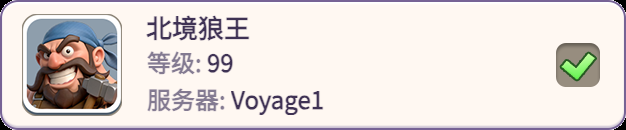
<style>
.page{position:relative;width:626px;height:130px;background:#fff8f2}
.page>*{position:absolute;margin:0}
.t1{font:26px "WebPSD-18463539-0-Regular";color:#3f3254;font-weight:bold}
.t2{font:24px "WebPSD-18463539-0-Regular";color:#837a91;font-weight:bold}
.t3{font:24px "WebPSD-18463539-0-Regular";color:#3f3254;font-weight:bold}
</style>
<div class="page">
<p class="t1" style="left:146px;top:14px;width:360px;height:28px">北境狼王</p>
<p class="t2" style="left:147px;top:49px;width:60px;height:28px">等级:</p>
<p class="t3" style="left:207px;top:49px;width:330px;height:28px">99</p>
<p class="t2" style="left:147px;top:85px;width:84px;height:30px">服务器:</p>
<p class="t3" style="left:231px;top:85px;width:306px;height:30px">Voyage1</p>
</div>
